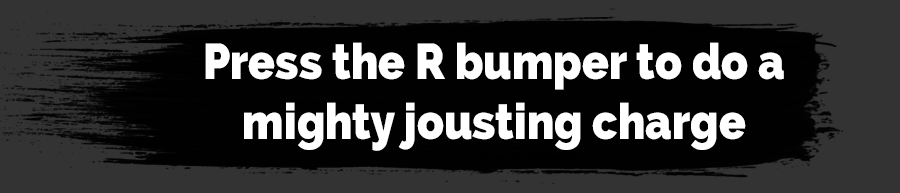
<style>
.page{position:relative;width:900px;height:193px;background:#010101}
.page>*{position:absolute;margin:0}
.t1{font:50px "Raleway-Heavy";color:#ffffff;scale:0.88 1}
</style>
<div class="page">
<p class="t1" style="left:205px;top:42px;width:579px;height:109px;text-align:center">Press the R bumper to do a <br>mighty jousting charge</p>
</div>
